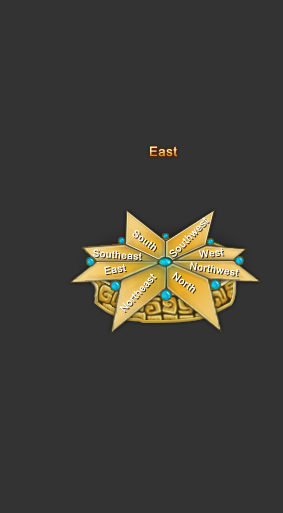
<style>
.page{position:relative;width:283px;height:513px;background:#333333}
.page>*{position:absolute;margin:0}
.t1{font:13px "ArialMT";letter-spacing:0.05em}
.t2{font:10px "ArialMT";letter-spacing:0.05em;color:#ffffff}
</style>
<div class="page">
<p class="t1" style="left:150px;top:146px;width:27px;height:11px">East</p>
<p class="t2" style="left:169px;top:217px;width:40px;height:40px;rotate:-46deg">Southwest</p>
<p class="t2" style="left:132px;top:230px;width:24px;height:22px;rotate:37deg">South</p>
<p class="t2" style="left:93px;top:249px;width:49px;height:12px;rotate:4deg">Southeast</p>
<p class="t2" style="left:198px;top:248px;width:26px;height:10px;rotate:-5deg">West</p>
<p class="t2" style="left:104px;top:264px;width:22px;height:11px;rotate:-9deg">East</p>
<p class="t2" style="left:190px;top:262px;width:49px;height:15px;rotate:8deg">Northwest</p>
<p class="t2" style="left:119px;top:273px;width:38px;height:39px;rotate:-48deg">Northeast</p>
<p class="t2" style="left:172px;top:272px;width:23px;height:21px;rotate:36deg">North</p>
</div>
